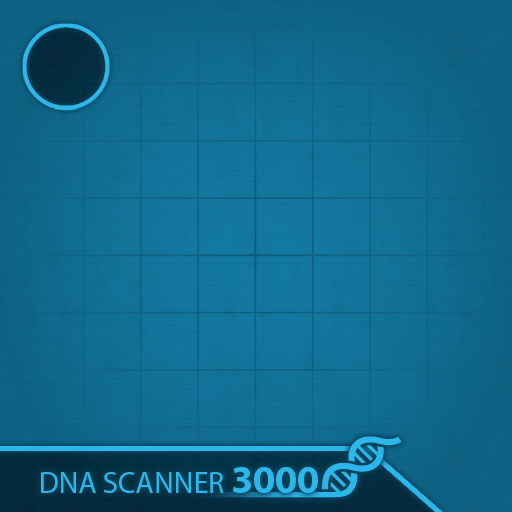
<style>
.page{position:relative;width:512px;height:512px}
.page>*{position:absolute;margin:0}
.t1{font:30px "MyriadPro-Regular";color:#2cb7eb}
.t2{font:40px "MyriadPro-Bold";color:#2cb7eb}
</style>
<div class="page">
<p class="t1" style="left:41px;top:467px;width:277px;height:26px">DNA SCANNER <span class="t2">3000</span></p>
</div>
